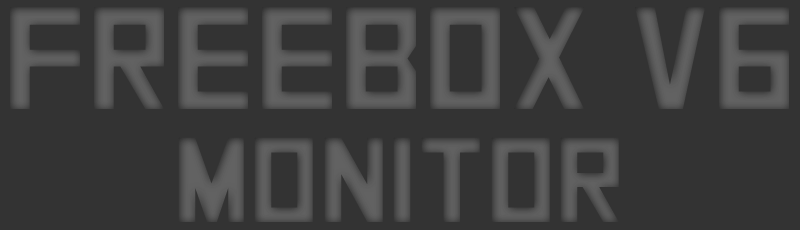
<style>
.page{position:relative;width:800px;height:230px;background:#333333}
.page>*{position:absolute;margin:0}
.t1{font:145.3px "SquareFont";color:#595959}
.t2{font:120px "SquareFont";color:#595959}
</style>
<div class="page">
<p class="t1" style="left:10px;top:7px;width:779px;height:102px">Freebox v6</p>
<p class="t2" style="left:178px;top:137px;width:441px;height:85px">Monitor</p>
</div>
